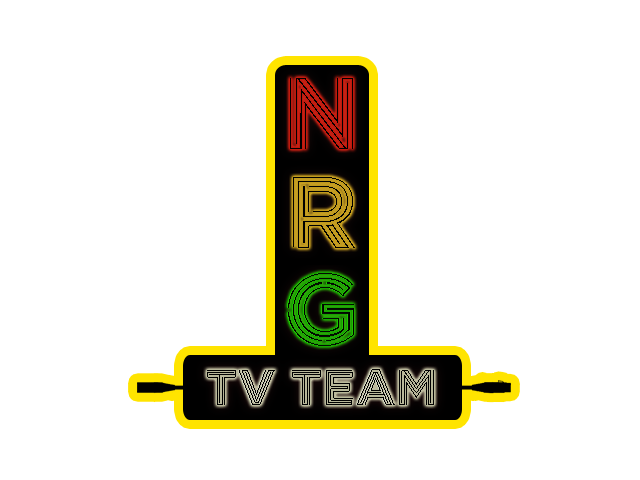
<style>
.page{position:relative;width:640px;height:480px;background:#ffffff}
.page>*{position:absolute;margin:0}
.t1{font:100px "Inception";color:#000000}
.t2{font:50px "Inception";color:#000000}
</style>
<div class="page">
<p class="t1" style="left:290px;top:78px;width:63px;height:71px">N</p>
<p class="t1" style="left:293px;top:177px;width:62px;height:71px">r</p>
<p class="t1" style="left:288px;top:273px;width:66px;height:73px;opacity:0.86">G</p>
<p class="t2" style="left:207px;top:369px;width:227px;height:36px">TV TEAM</p>
</div>
